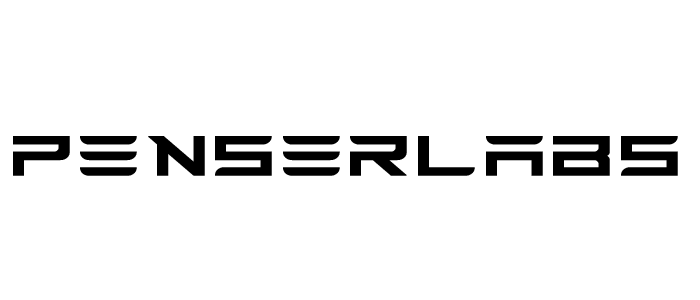
<style>
.page{position:relative;width:700px;height:300px;background:#ffffff}
.page>*{position:absolute;margin:0}
.t1{font:62.5px "TESLA";letter-spacing:0.025em;color:#000000;text-transform:uppercase;font-weight:bold;scale:1.17 1}
</style>
<div class="page">
<p class="t1" style="left:13px;top:136px;width:665px;height:40px">PENSERLABS</p>
</div>
